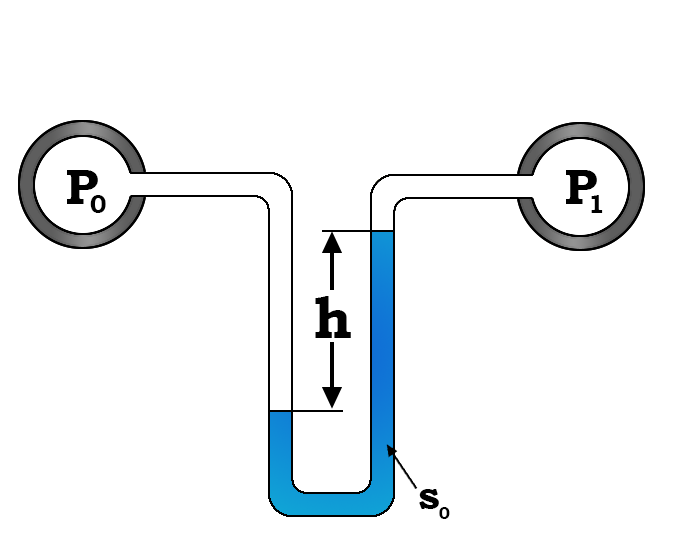
<style>
.page{position:relative;width:682px;height:560px;background:#ffffff}
.page>*{position:absolute;margin:0}
.t1{font:50px "BookmanOldStyle-Bold";color:#000000}
.t2{font:25px "BookmanOldStyle-Bold";color:#000000}
.t3{font:58.3px "BookmanOldStyle-Bold";color:#000000}
.t4{font:41.7px "BookmanOldStyle-Bold";color:#000000}
.t5{font:16.7px "BookmanOldStyle-Bold";color:#000000}
</style>
<div class="page">
<p class="t1" style="left:67px;top:170px;width:31px;height:34px">P</p>
<p class="t1" style="left:566px;top:170px;width:31px;height:34px">P</p>
<p class="t2" style="left:90px;top:195px;width:16px;height:18px">0</p>
<p class="t2" style="left:591px;top:195px;width:12px;height:18px">1</p>
<p class="t3" style="left:315px;top:296px;width:36px;height:42px">h</p>
<p class="t4" style="left:419px;top:489px;width:20px;height:20px">s</p>
<p class="t5" style="left:439px;top:507px;width:11px;height:12px">0</p>
</div>
